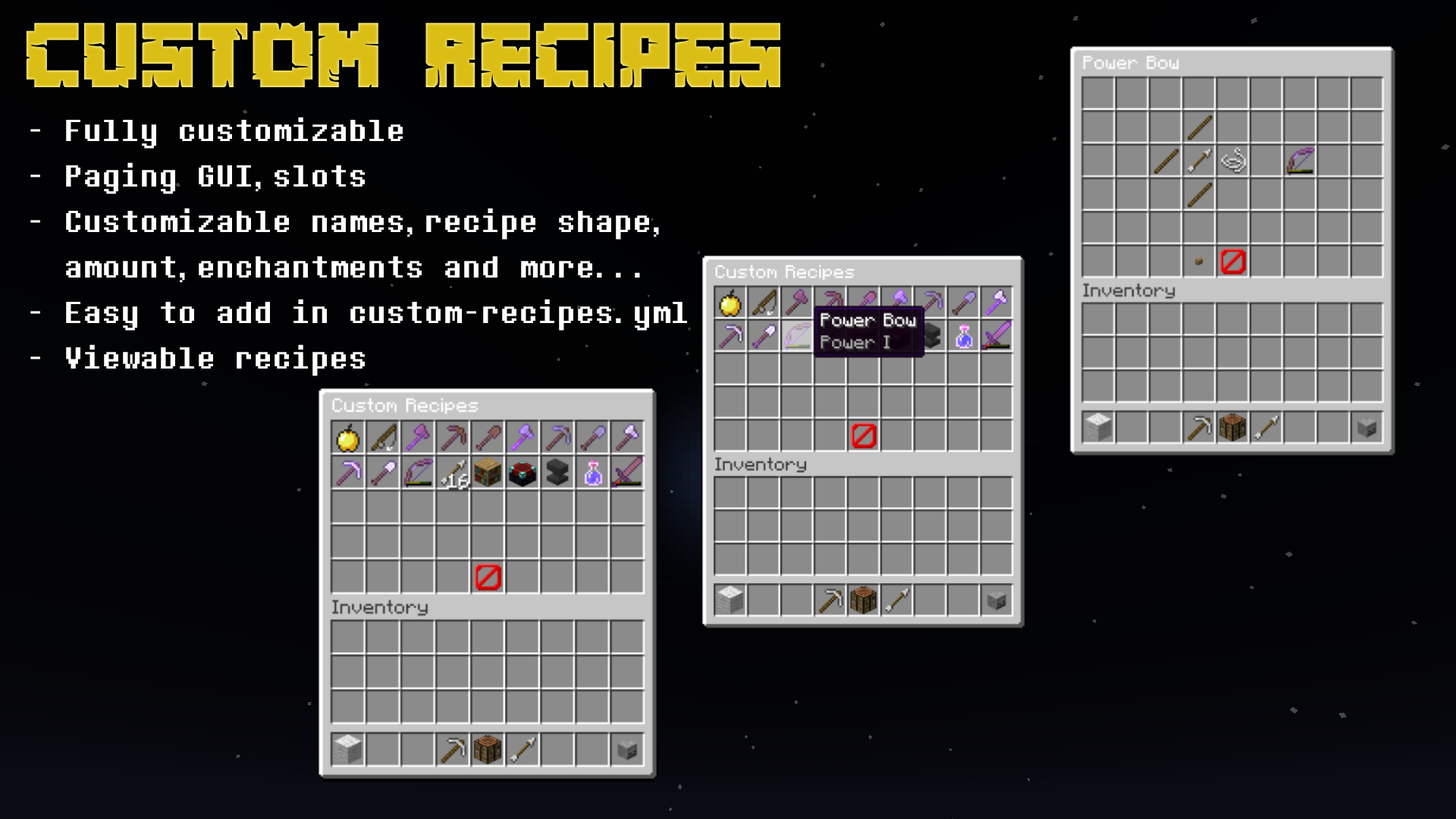
<style>
.page{position:relative;width:1456px;height:819px}
.page>*{position:absolute;margin:0}
.t1{font:81.9px "MinecrafterAlt";color:#dbbe15}
.t2{font:81.9px "MinecrafterAlt";color:#100110}
.t3{font:37.9px "DeterminationMonoWeb";color:#ffffff}
</style>
<div class="page">
<p class="t1" style="left:26px;top:22px;width:754px;height:66px"><span class="t2">C</span>USTOM RECIPES</p>
<p class="t3" style="left:30px;top:117px;width:657px;height:259px">- Fully customizable<br>- Paging GUI,slots<br>- Customizable names,recipe shape,<br>  amount,enchantments and more...<br>- Easy to add in custom-recipes.yml<br>- Viewable recipes</p>
</div>
